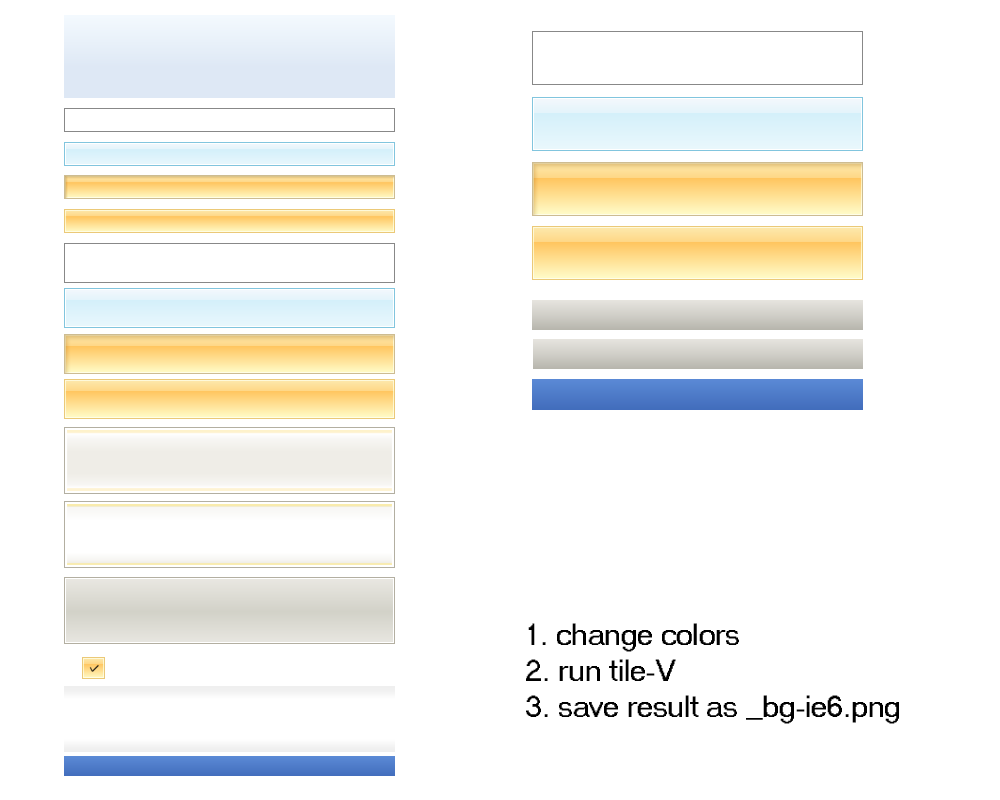
<style>
.page{position:relative;width:1000px;height:800px;background:#ffffff}
.page>*{position:absolute;margin:0}
.t1{font:30px "MS Sans Serif";letter-spacing:-0.01em;color:#000000}
</style>
<div class="page">
<p class="t1" style="left:526px;top:623px;width:373px;height:101px">1. change colors<br>2. run tile-V<br>3. save result as _bg-ie6.png</p>
</div>
